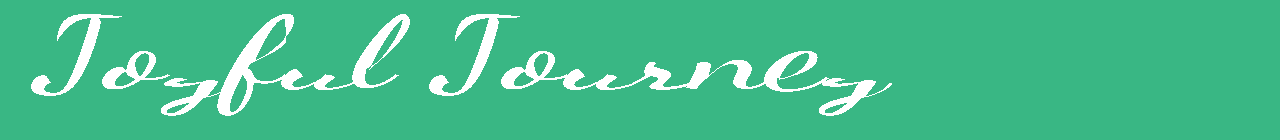
<style>
.page{position:relative;width:1280px;height:140px;background:#39b784}
.page>*{position:absolute;margin:0}
.t1{font:101.5px "DancingScript-Bold";color:#ffffff;scale:1.58 1}
</style>
<div class="page">
<p class="t1" style="left:31px;top:14px;width:861px;height:102px">Joyful Journey</p>
</div>
